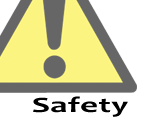
<style>
.page{position:relative;width:160px;height:120px;background:#ffffff}
.page>*{position:absolute;margin:0}
.t1{font:22px "Candara-Bold";color:#000000;scale:1.6 1}
</style>
<div class="page">
<p class="t1" style="left:33px;top:96px;width:95px;height:21px">Safety</p>
</div>
